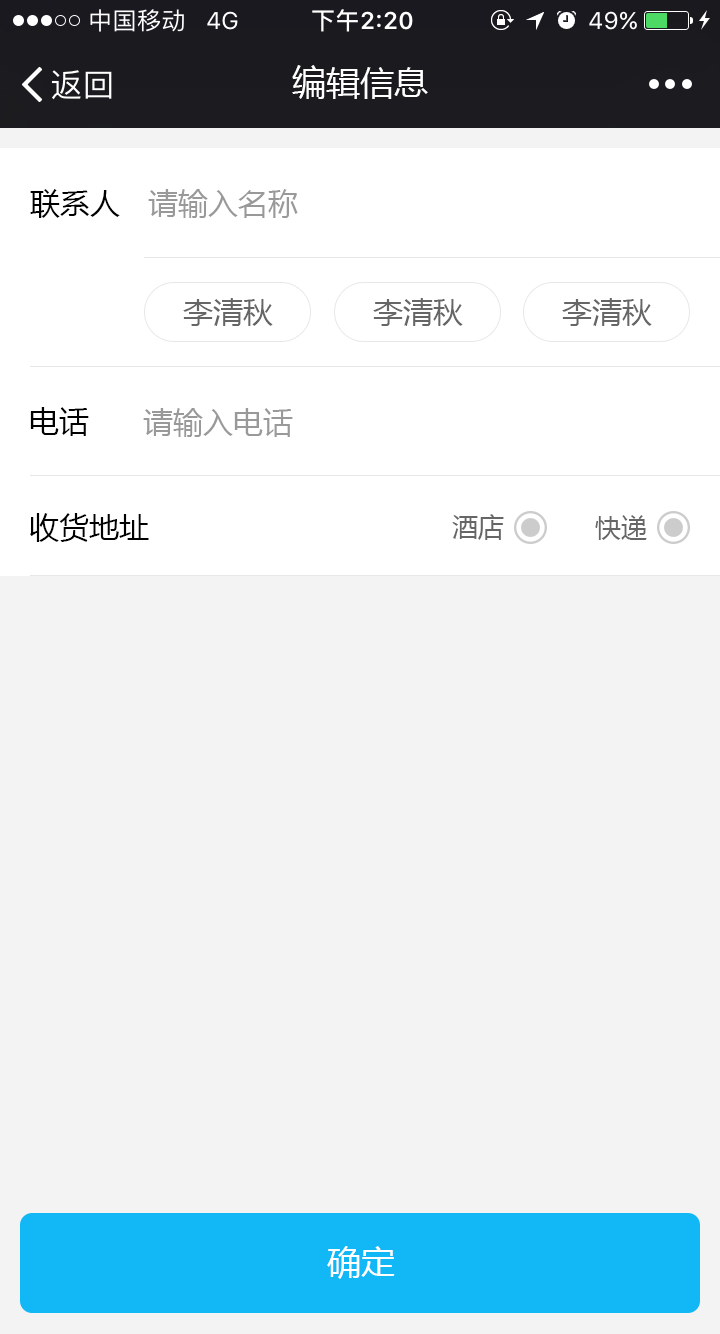
<style>
.page{position:relative;width:720px;height:1334px;background:#f3f3f3}
.page>*{position:absolute;margin:0}
.t1{font:34px "MicrosoftYaHei";color:#ffffff}
.t2{font:30px "MicrosoftYaHei";color:#000000}
.t3{font:30px "MicrosoftYaHei";color:#999999}
.t4{font:30px "MicrosoftYaHei";color:#666666}
.t5{font:26px "MicrosoftYaHei";color:#666666}
</style>
<div class="page">
<p class="t1" style="left:292px;top:65px;width:136px;height:34px">编辑信息</p>
<p class="t2" style="left:30px;top:189px;width:90px;height:29px">联系人</p>
<p class="t3" style="left:148px;top:189px;width:150px;height:29px">请输入名称</p>
<p class="t4" style="left:183px;top:298px;width:90px;height:28px">李清秋</p>
<p class="t4" style="left:373px;top:298px;width:90px;height:28px">李清秋</p>
<p class="t4" style="left:562px;top:298px;width:90px;height:28px">李清秋</p>
<p class="t2" style="left:30px;top:407px;width:59px;height:29px">电话</p>
<p class="t3" style="left:143px;top:408px;width:150px;height:29px">请输入电话</p>
<p class="t2" style="left:30px;top:513px;width:119px;height:29px">收货地址</p>
<p class="t5" style="left:452px;top:514px;width:52px;height:26px">酒店</p>
<p class="t5" style="left:595px;top:515px;width:52px;height:25px">快递</p>
<p class="t1" style="left:327px;top:1246px;width:68px;height:33px">确定</p>
</div>
